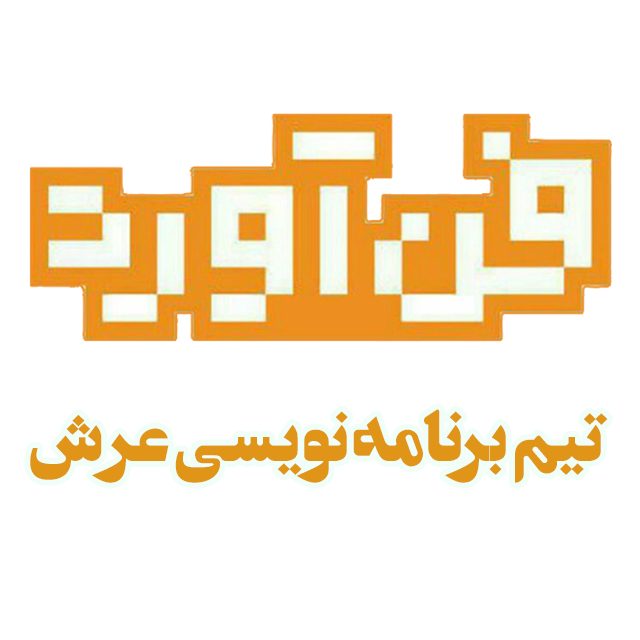
<style>
.page{position:relative;width:640px;height:640px;background:#ffffff}
.page>*{position:absolute;margin:0}
.t1{font:92.9px "Ordibehesht-bold";color:#e09518;scale:1.04 1}
</style>
<div class="page">
<p class="t1" style="left:30px;top:409px;width:578px;height:74px">تیم  برنامه  نویسی  عرش</p>
</div>
